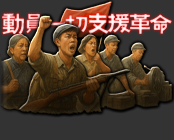
<style>
.page{position:relative;width:174px;height:140px;background:#333333}
.page>*{position:absolute;margin:0}
.t1{font:25.4px "FZZJ-MSHLFW";letter-spacing:-0.17em}
</style>
<div class="page">
<p class="t1" style="left:2px;top:13px;width:170px;height:22px">动员一切支援革命</p>
</div>
